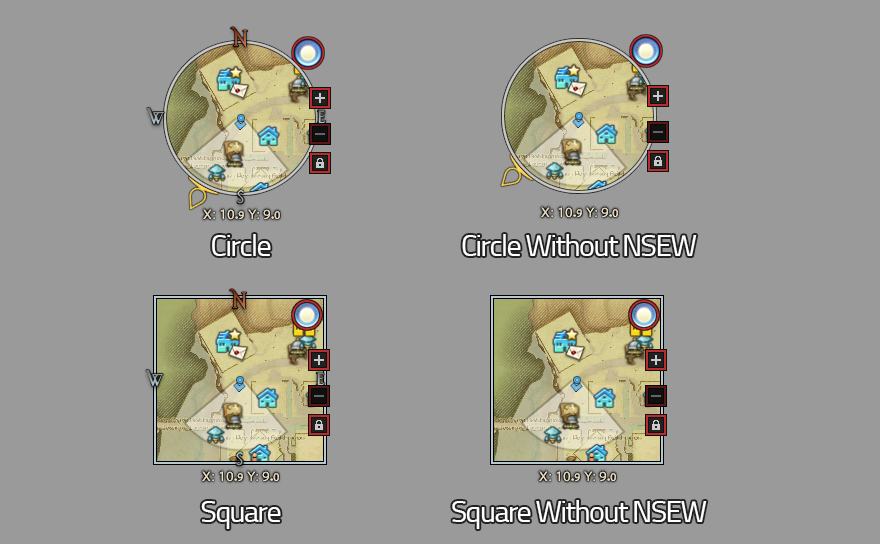
<style>
.page{position:relative;width:880px;height:544px;background:#9a9a9a}
.page>*{position:absolute;margin:0}
.t1{font:30px "Titillium-Regular";letter-spacing:-0.05em;color:#ffffff}
</style>
<div class="page">
<p class="t1" style="left:212px;top:234px;width:59px;height:22px">Circle</p>
<p class="t1" style="left:462px;top:234px;width:235px;height:22px">Circle Without NSEW</p>
<p class="t1" style="left:201px;top:501px;width:80px;height:28px">Square</p>
<p class="t1" style="left:452px;top:500px;width:255px;height:29px">Square Without NSEW</p>
</div>
